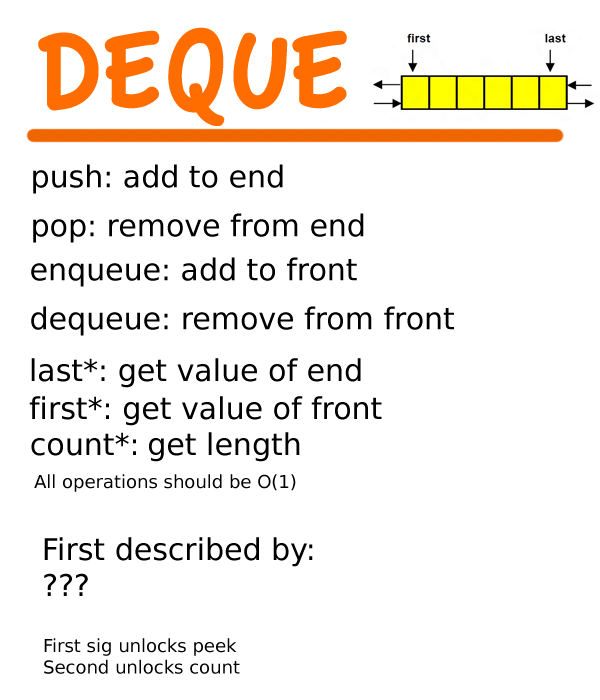
<style>
.page{position:relative;width:600px;height:700px;background:#ffffff}
.page>*{position:absolute;margin:0}
.t1{font:120px "AppleCasual";color:#ff6c00}
.t2{font:30px "BitstreamVeraSans-Roman";color:#000000}
.t3{font:18px "BitstreamVeraSans-Roman";color:#000000}
</style>
<div class="page">
<p class="t1" style="left:38px;top:27px;width:309px;height:99px">DEQUE</p>
<p class="t2" style="left:33px;top:164px;width:250px;height:30px">push: add to end</p>
<p class="t2" style="left:33px;top:213px;width:331px;height:30px">pop: remove from end</p>
<p class="t2" style="left:31px;top:257px;width:326px;height:30px">enqueue: add to front</p>
<p class="t2" style="left:31px;top:306px;width:423px;height:30px">dequeue: remove from front</p>
<p class="t2" style="left:31px;top:358px;width:330px;height:30px">last*: get value of end</p>
<p class="t2" style="left:29px;top:396px;width:353px;height:30px">first*: get value of front</p>
<p class="t2" style="left:31px;top:432px;width:269px;height:30px">count*: get length</p>
<p class="t3" style="left:34px;top:474px;width:262px;height:18px">All operations should be O(1)</p>
<p class="t2" style="left:44px;top:537px;width:269px;height:59px">First described by:<br>???</p>
<p class="t3" style="left:44px;top:638px;width:196px;height:36px">First sig unlocks peek<br>Second unlocks count</p>
</div>
